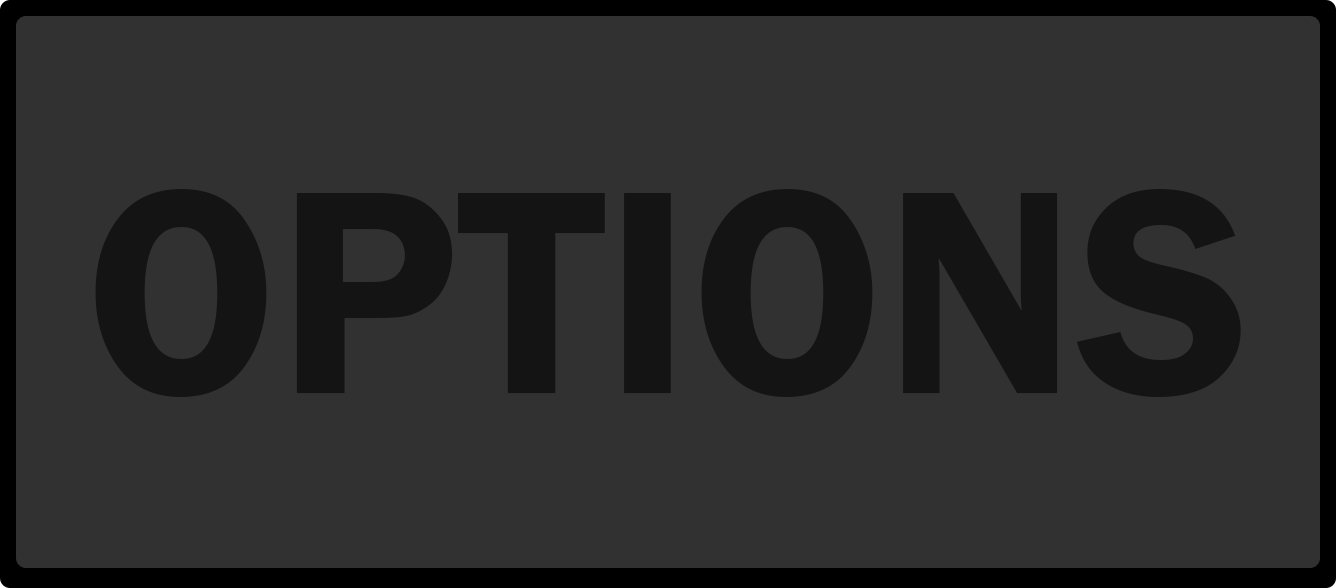
<style>
.page{position:relative;width:1336px;height:588px;background:#313131}
.page>*{position:absolute;margin:0}
.t1{font:300px "FranklinGothic-Demi";color:#141414}
</style>
<div class="page">
<p class="t1" style="left:95px;top:189px;width:1146px;height:208px">OPTIONS</p>
</div>
